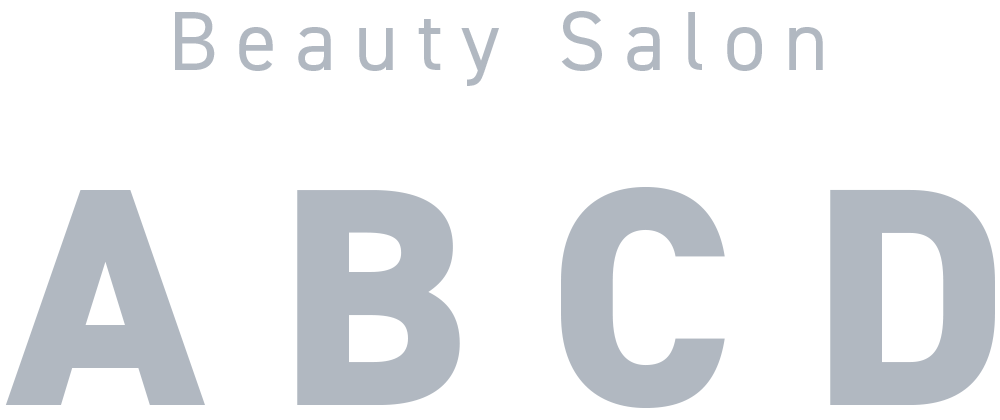
<style>
.page{position:relative;width:1000px;height:420px;background:#ffffff}
.page>*{position:absolute;margin:0}
.t1{font:83.5px "DIN2014-Regular";letter-spacing:0.22em;color:#b1b8c1}
.t2{font:311px "DIN2014-ExtraBold";color:#b1b8c1}
</style>
<div class="page">
<p class="t1" style="left:175px;top:11px;width:648px;height:75px">Beauty Salon</p>
<p class="t2" style="left:5px;top:186px;width:990px;height:222px">A B C D</p>
</div>
